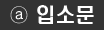
<style>
.page{position:relative;width:104px;height:30px;background:#333333}
.page>*{position:absolute;margin:0}
.t1{font:20.2px "H2hdrM";color:#ffffff}
</style>
<div class="page">
<p class="t1" style="left:10px;top:5px;width:84px;height:19px">ⓐ 입소문</p>
</div>
